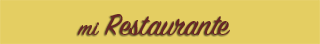
<style>
.page{position:relative;width:320px;height:44px;background:#e4ce62}
.page>*{position:absolute;margin:0}
.t1{font:33.6px "SignPainter-HouseScript";color:#672626}
.t2{font:25.2px "SignPainter-HouseScript";color:#672626}
</style>
<div class="page">
<p class="t1" style="left:78px;top:14px;width:152px;height:21px"><span class="t2">mi</span> Restaurante</p>
</div>
